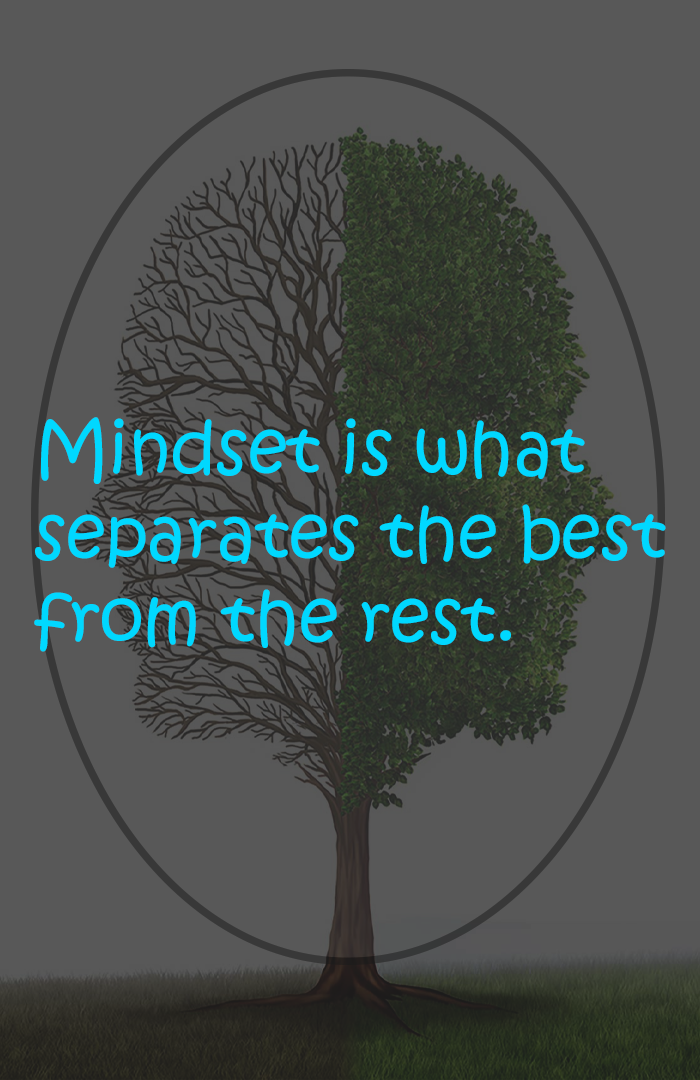
<style>
.page{position:relative;width:700px;height:1080px;background:#585858}
.page>*{position:absolute;margin:0}
.t1{font:70.2px "KristenITC-Regular";color:#00d8ff}
</style>
<div class="page">
<p class="t1" style="left:34px;top:417px;width:632px;height:235px">Mindset is what<br>separates the best<br>from the rest.</p>
</div>
